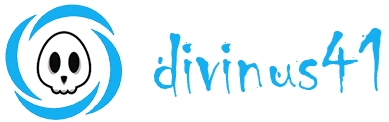
<style>
.page{position:relative;width:389px;height:122px;background:#ffffff}
.page>*{position:absolute;margin:0}
.t1{font:90px "Chiller-Regular";color:#13aff0}
</style>
<div class="page">
<p class="t1" style="left:153px;top:28px;width:229px;height:69px">divinus41</p>
</div>
